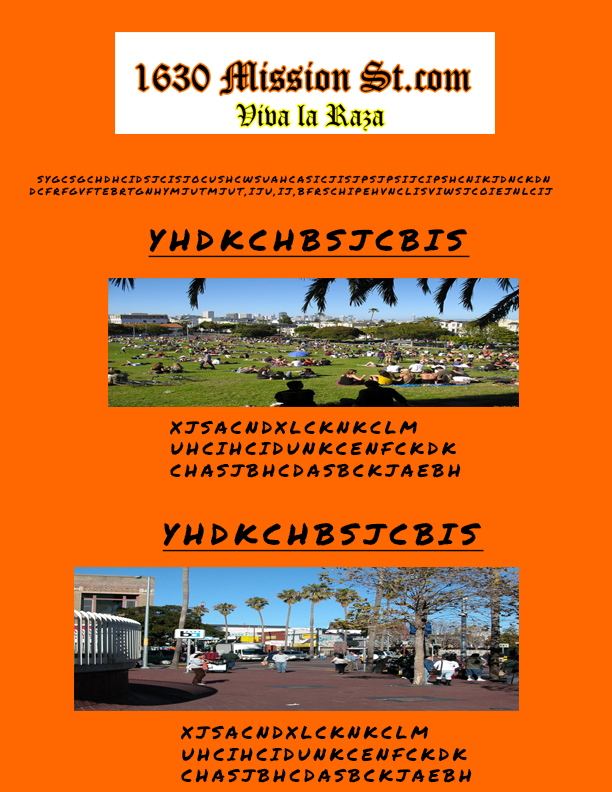
<style>
.page{position:relative;width:612px;height:792px;background:#ff6700}
.page>*{position:absolute;margin:0}
.t1{font:10px "PermanentMarker";letter-spacing:0.2em;color:#000000;text-transform:uppercase}
.t2{font:10px "PermanentMarker";letter-spacing:0.2em;color:#ff6600;text-transform:uppercase}
.t3{font:30px "PermanentMarker";letter-spacing:0.2em;color:#000000;text-transform:uppercase;text-decoration:underline}
.t4{font:18px "PermanentMarker";letter-spacing:0.2em;color:#000000;text-transform:uppercase}
</style>
<div class="page">
<p class="t1" style="left:29px;top:175px;width:524px;height:22px"><span class="t2">d</span>sygcsgchdhcidsjcisjocushcwsuahcasicjisjpsjpsIJCIPshcnikjdnckdn<br>dcfrfgvftebrtgnhymjutmjut,iju,ij,bfrschipehvnclisviwsjcoiejnlcij</p>
<p class="t3" style="left:148px;top:228px;width:322px;height:30px">yhdkchbsjcbis</p>
<p class="t4" style="left:170px;top:420px;width:291px;height:58px">xjsacndxlcknkclm<br>uhcihcidunkcenfckdk<br>chasjbhcdasbckjaebh</p>
<p class="t3" style="left:162px;top:522px;width:322px;height:30px">yhdkchbsjcbis</p>
<p class="t4" style="left:181px;top:725px;width:291px;height:58px">xjsacndxlcknkclm<br>uhcihcidunkcenfckdk<br>chasjbhcdasbckjaebh</p>
</div>
